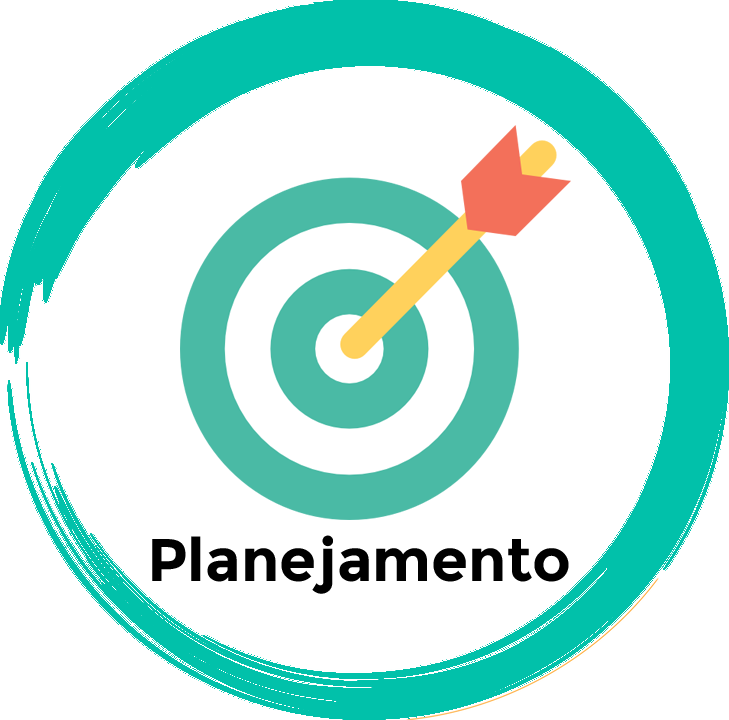
<style>
.page{position:relative;width:729px;height:720px;background:#ffffff}
.page>*{position:absolute;margin:0}
.t1{font:60px "Montserrat-Bold";color:#000000}
</style>
<div class="page">
<p class="t1" style="left:152px;top:535px;width:417px;height:59px">Planejamento</p>
</div>
